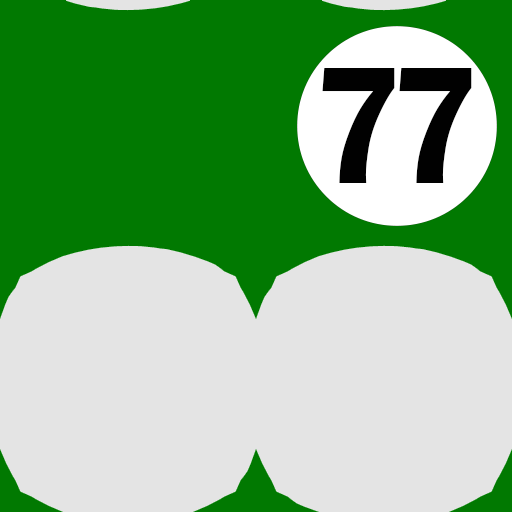
<style>
.page{position:relative;width:512px;height:512px;background:#e4e4e4}
.page>*{position:absolute;margin:0}
.t1{font:172.5px "FranklinGothic-Demi";letter-spacing:-0.05em;color:#010101;scale:0.87 1}
</style>
<div class="page">
<p class="t1" style="left:322px;top:68px;width:150px;height:115px">77</p>
</div>
